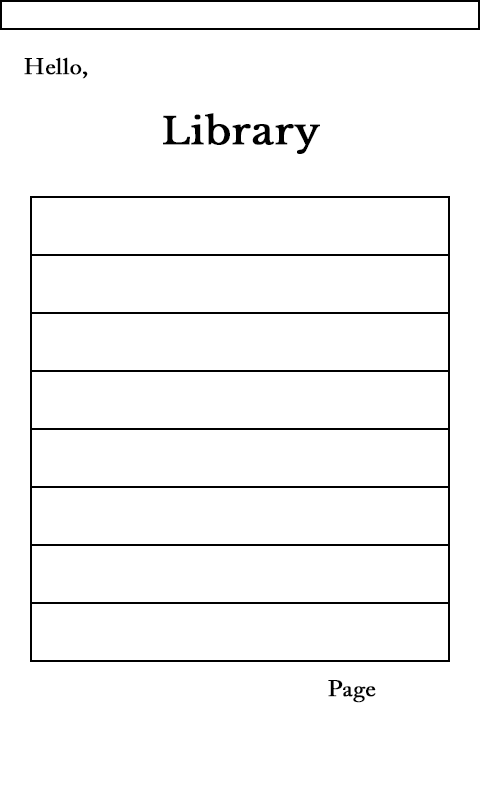
<style>
.page{position:relative;width:480px;height:800px;background:#ffffff}
.page>*{position:absolute;margin:0}
.t1{font:22.5px "ACaslonPro-Regular";color:#000000;font-weight:bold;scale:1.07 1}
.t2{font:36.8px "LibreBaskerville-Regular";color:#000000;font-weight:bold;scale:1.07 1}
</style>
<div class="page">
<p class="t1" style="left:24px;top:57px;width:64px;height:22px">Hello,</p>
<p class="t2" style="left:163px;top:113px;width:157px;height:41px">Library</p>
<p class="t1" style="left:328px;top:680px;width:48px;height:23px">Page</p>
</div>
